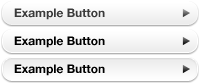
<style>
.page{position:relative;width:200px;height:84px}
.page>*{position:absolute;margin:0}
.t1{font:12px "HelveticaNeue-Bold";color:#3b3b3b}
.t2{font:12px "HelveticaNeue-Bold";color:#000000}
</style>
<div class="page">
<p class="t1" style="left:14px;top:8px;width:91px;height:12px">Example Button</p>
<p class="t2" style="left:14px;top:36px;width:91px;height:12px">Example Button</p>
<p class="t2" style="left:14px;top:64px;width:91px;height:12px">Example Button</p>
</div>
